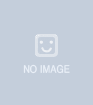
<style>
.page{position:relative;width:93px;height:105px;background:#c4cedb}
.page>*{position:absolute;margin:0}
.t1{font:10px "YGO540";color:#e9eff7;text-transform:uppercase}
</style>
<div class="page">
<p class="t1" style="left:23px;top:64px;width:47px;height:10px">no image</p>
</div>
